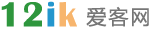
<style>
.page{position:relative;width:155px;height:30px;background:#ffffff}
.page>*{position:absolute;margin:0}
.t1{font:36px "BritannicBold";letter-spacing:0.05em;color:#2e963d}
.t2{font:36px "BritannicBold";letter-spacing:0.05em;color:#2496cd}
.t3{font:36px "BritannicBold";letter-spacing:0.05em;color:#f7b56d}
.t4{font:20px "MicrosoftYaHei";letter-spacing:0.1em;color:#767676}
</style>
<div class="page">
<p class="t1" style="left:1px;top:1px;width:76px;height:26px">12<span class="t2">i</span><span class="t3">k</span></p>
<p class="t4" style="left:86px;top:6px;width:63px;height:21px">爱客网</p>
</div>
